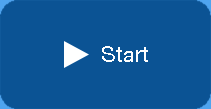
<style>
.page{position:relative;width:211px;height:109px;background:#0b5394}
.page>*{position:absolute;margin:0}
.t1{font:22.2px "HelveticaNeue";color:#fefefe}
</style>
<div class="page">
<p class="t1" style="left:102px;top:46px;width:46px;height:16px">Start</p>
</div>
